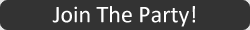
<style>
.page{position:relative;width:250px;height:30px;background:#333333}
.page>*{position:absolute;margin:0}
.t1{font:24px "Calibri";color:#ffffff}
</style>
<div class="page">
<p class="t1" style="left:52px;top:6px;width:143px;height:21px">Join The Party!</p>
</div>
